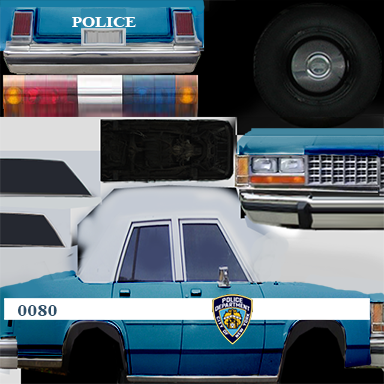
<style>
.page{position:relative;width:384px;height:384px}
.page>*{position:absolute;margin:0}
.t1{font:14.2px "TimesNewRomanPS-BoldMT";color:#ffffff;scale:1.19 1}
.t2{font:17px "TimesNewRomanPS-BoldMT";color:#2e4f68;scale:1.19 1}
</style>
<div class="page">
<p class="t1" style="left:72px;top:17px;width:64px;height:10px">POLICE</p>
<p class="t2" style="left:18px;top:305px;width:39px;height:11px">0080</p>
</div>
